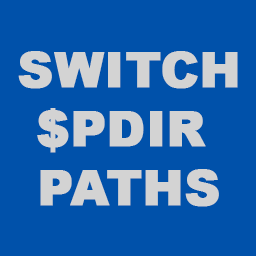
<style>
.page{position:relative;width:256px;height:256px;background:#0051aa}
.page>*{position:absolute;margin:0}
.t1{font:48.9px "Arial-Black";color:#d3d3d3;font-weight:bold}
</style>
<div class="page">
<p class="t1" style="left:18px;top:51px;width:220px;height:156px;text-align:center">SWITCH<br>$PDIR <br>PATHS</p>
</div>
